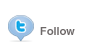
<style>
.page{position:relative;width:93px;height:48px;background:#ffffff}
.page>*{position:absolute;margin:0}
.t1{font:11px "Helvetica-Bold";color:#6e6969}
</style>
<div class="page">
<p class="t1" style="left:40px;top:27px;width:35px;height:8px">Follow</p>
</div>
